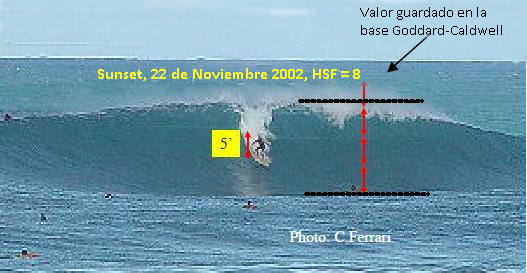
<style>
.page{position:relative;width:527px;height:273px}
.page>*{position:absolute;margin:0}
.t1{font:14.7px "Calibri";color:#000000}
.t2{font:16px "Calibri-Bold";color:#fff62e}
</style>
<div class="page">
<p class="t1" style="left:360px;top:7px;width:142px;height:28px">Valor guardado en la<br>base Goddard-Caldwell</p>
<p class="t2" style="left:98px;top:68px;width:262px;height:13px">Sunset, 22 de Noviembre 2002, HSF = 8</p>
</div>
